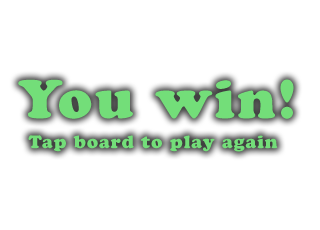
<style>
.page{position:relative;width:320px;height:230px;background:#ffffff}
.page>*{position:absolute;margin:0}
.t1{font:54px "CooperBlackStd";letter-spacing:0.05em;color:#73de79}
.t2{font:18px "CooperBlackStd";letter-spacing:0.05em;color:#73de79}
</style>
<div class="page">
<p class="t1" style="left:18px;top:79px;width:276px;height:40px">You win!</p>
<p class="t2" style="left:28px;top:135px;width:250px;height:17px">Tap board to play again</p>
</div>
